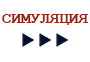
<style>
.page{position:relative;width:90px;height:62px;background:#ffffff}
.page>*{position:absolute;margin:0}
.t1{font:16px "CourierNewPS-BoldMT";color:#912816}
</style>
<div class="page">
<p class="t1" style="left:2px;top:14px;width:86px;height:11px">СИМУЛЯЦИЯ</p>
</div>
